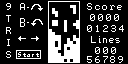
<style>
.page{position:relative;width:128px;height:64px;background:#000000}
.page>*{position:absolute;margin:0}
.t1{font:10px "Terminal";color:#ffffff}
.t2{font:10.5px "Terminal";color:#ffffff}
.t3{font:8px "Terminal";color:#ffffff}
</style>
<div class="page">
<p class="t1" style="left:6px;top:3px;width:5px;height:55px;text-align:right">9<br>T<br>R<br>I<br>S</p>
<p class="t1" style="left:87px;top:3px;width:35px;height:7px">Score</p>
<p class="t2" style="left:90px;top:14px;width:29px;height:7px">0000</p>
<p class="t2" style="left:87px;top:25px;width:37px;height:7px">01234</p>
<p class="t3" style="left:91px;top:36px;width:29px;height:7px">Lines</p>
<p class="t2" style="left:95px;top:47px;width:21px;height:7px">000</p>
<p class="t2" style="left:87px;top:56px;width:36px;height:7px">56789</p>
</div>
